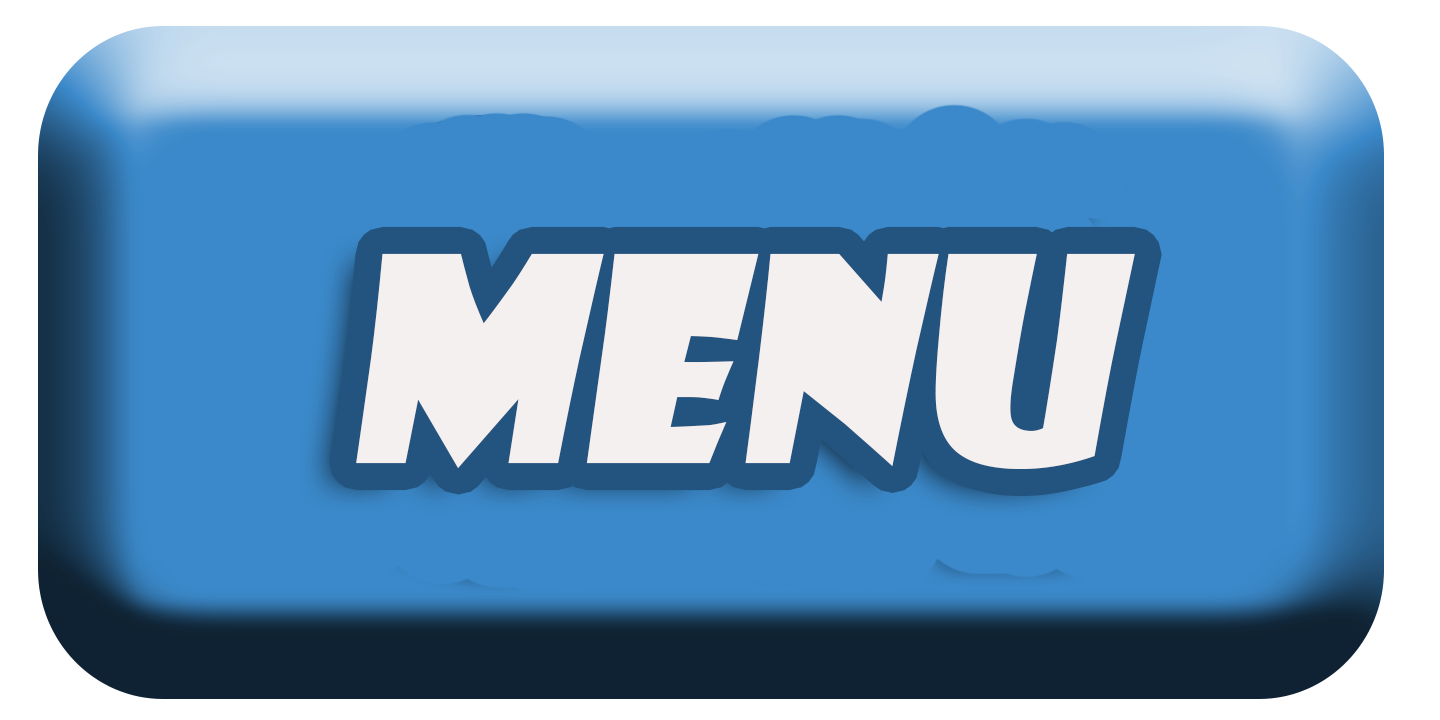
<style>
.page{position:relative;width:1440px;height:720px;background:#3b89ca}
.page>*{position:absolute;margin:0}
.t1{font:279.2px "ShowcardGothic-Reg";color:#f5f0f0;font-style:italic}
</style>
<div class="page">
<p class="t1" style="left:356px;top:253px;width:779px;height:216px">menu</p>
</div>
